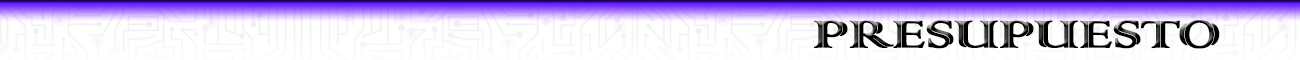
<style>
.page{position:relative;width:1300px;height:60px;background:#ffffff}
.page>*{position:absolute;margin:0}
.t1{font:50.8px "ColonnaMT";letter-spacing:-0.03em;color:#000000;text-transform:uppercase;font-weight:bold;scale:1.25 1}
</style>
<div class="page">
<p class="t1" style="left:814px;top:20px;width:406px;height:29px">Presupuesto</p>
</div>
